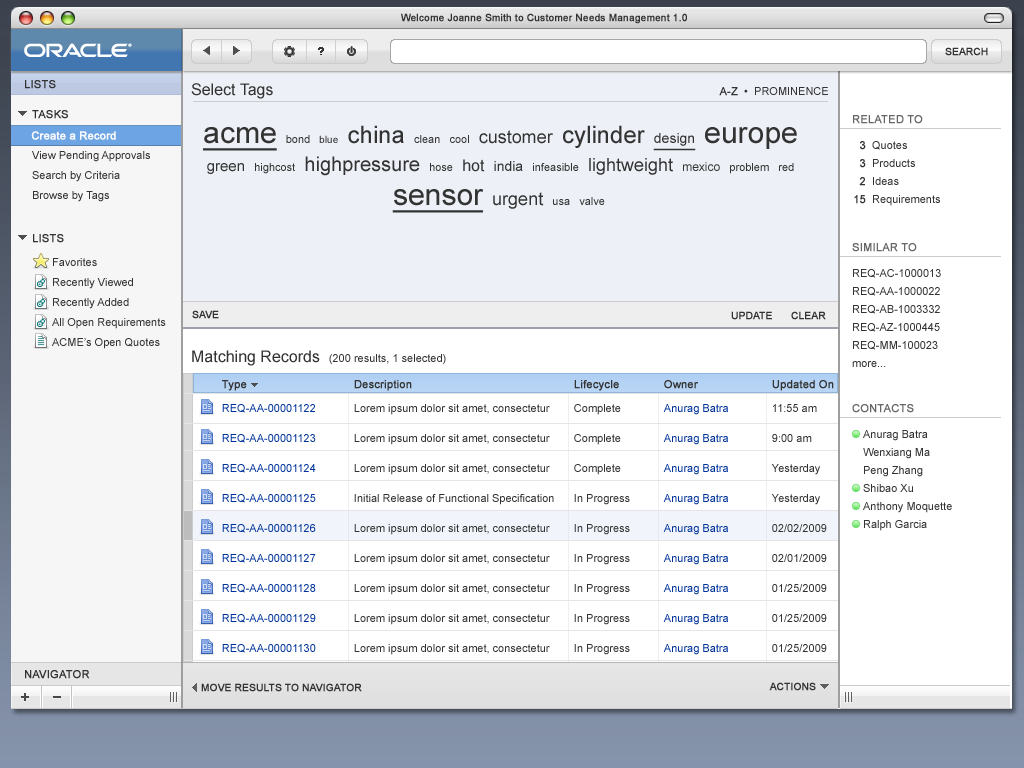
<style>
.page{position:relative;width:1024px;height:768px;background:#ffffff}
.page>*{position:absolute;margin:0}
.t1{font:16px "ArialMT";color:#333333}
.t2{font:11px "ArialMT";color:#333333;text-transform:uppercase}
.t3{font:11px "ArialMT";color:#333333;font-variant:small-caps;font-weight:bold}
.t4{font:11px "ArialMT";color:#333333;font-variant:small-caps}
.t5{font:11px "ArialMT";color:#333333;text-transform:uppercase;font-weight:bold}
.t6{font:11px/14px "ArialMT";color:#333333}
.t7{font:30px/14px "ArialMT";color:#333333;text-decoration:underline}
.t8{font:10px/14px "ArialMT";color:#333333}
.t9{font:24px/14px "ArialMT";color:#333333}
.t10{font:18px/14px "ArialMT";color:#333333}
.t11{font:14px/14px "ArialMT";color:#333333;text-decoration:underline}
.t12{font:30px/14px "ArialMT";color:#333333}
.t13{font:15px/14px "ArialMT";color:#333333}
.t14{font:20px/14px "ArialMT";color:#333333}
.t15{font:16px/14px "ArialMT";color:#333333}
.t16{font:14px/14px "ArialMT";color:#333333}
.t17{font:12px/14px "ArialMT";color:#333333}
.t18{font:11px "ArialMT";color:#666666;text-transform:uppercase;font-weight:bold}
.t19{font:11px "ArialMT";color:#666666;font-weight:bold}
.t20{font:11px "ArialMT";color:#fafafd;font-weight:bold}
.t21{font:11px/20px "ArialMT";color:#333333}
.t22{font:11px/18px "ArialMT";color:#333333;font-weight:bold}
.t23{font:11px/18px "ArialMT";color:#333333}
.t24{font:10px "ArialMT";color:#333333;text-transform:uppercase;font-weight:bold}
.t25{font:10px "ArialMT";color:#333333;font-weight:bold}
.t26{font:11px "ArialMT";color:#333333}
.t27{font:11px/10px "ArialMT";color:#003399}
.t28{font:11px "ArialMT";color:#333333;font-weight:bold}
.t29{font:11px/14px "ArialMT";color:#003399}
.t30{font:11px/10px "ArialMT";color:#333333}
.t31{font:11px/8px "ArialMT";color:#333333;font-weight:bold}
</style>
<div class="page">
<p class="t1" style="left:191px;top:83px;width:82px;height:16px">Select Tags</p>
<p class="t2" style="left:719px;top:87px;width:109px;height:9px"><span class="t3">A-Z</span><span class="t4">  •  P</span>rominence</p>
<p class="t5" style="left:32px;top:110px;width:36px;height:9px">Tasks</p>
<p class="t6" style="left:203px;top:125px;width:594px;height:88px;text-align:center"><span class="t7">acme</span>   bond   <span class="t8">blue   </span><span class="t9">china</span>   clean   cool   <span class="t10">customer   </span><span class="t9">cylinder   </span><span class="t11">design   </span><span class="t12">europe   <br></span><span class="t13"><br>green</span>   highcost   <span class="t14">highpressure</span>   hose   <span class="t15">hot   </span><span class="t16">india</span>   infeasible   <span class="t10">lightweight   </span><span class="t17">mexico</span>   problem   red   <br><br><span class="t7">sensor   </span><span class="t10">urgent</span>   usa   valve</p>
<p class="t18" style="left:853px;top:115px;width:70px;height:9px"><span class="t19">R</span>elated To</p>
<p class="t20" style="left:31px;top:131px;width:85px;height:9px">Create a Record</p>
<p class="t21" style="left:32px;top:131px;width:118px;height:71px">Create a Record<br>View Pending Approvals<br>Search by Criteria<br>Browse by Tags</p>
<p class="t22" style="left:854px;top:141px;width:12px;height:63px;text-align:right">3<br>3<br>2<br>15</p>
<p class="t23" style="left:872px;top:141px;width:68px;height:65px">Quotes<br>Products<br>Ideas<br>Requirements</p>
<p class="t5" style="left:33px;top:234px;width:31px;height:9px">lists</p>
<p class="t18" style="left:852px;top:243px;width:65px;height:9px"><span class="t19">S</span>IMILAR TO</p>
<p class="t21" style="left:52px;top:258px;width:114px;height:91px">Favorites<br>Recently Viewed<br>Recently Added<br>All Open Requirements<br>ACME’s Open Quotes</p>
<p class="t23" style="left:852px;top:269px;width:89px;height:98px">REQ-AC-1000013<br>REQ-AA-1000022<br>REQ-AB-1003332<br>REQ-AZ-1000445<br>REQ-MM-100023<br>more...</p>
<p class="t24" style="left:192px;top:310px;width:27px;height:9px"><span class="t25">S</span>ave</p>
<p class="t24" style="left:731px;top:311px;width:41px;height:9px">Update</p>
<p class="t24" style="left:791px;top:311px;width:35px;height:9px">Clear</p>
<p class="t26" style="left:192px;top:350px;width:254px;height:16px"><span class="t1">Matching Records  </span>(200 results, 1 selected)</p>
<p class="t27" style="left:222px;top:380px;width:94px;height:273px"><span class="t28">Type<br><br></span><span class="t29">REQ-AA-00001122<br></span><br><br>REQ-AA-00001123<br><br><br>REQ-AA-00001124<br><br><br>REQ-AA-00001125<br><br> <br>REQ-AA-00001126<br><br><br>REQ-AA-00001127<br><br><br>REQ-AA-00001128<br><br><br>REQ-AA-00001129<br><br><br>REQ-AA-00001130</p>
<p class="t30" style="left:354px;top:380px;width:200px;height:275px"><span class="t28">De</span><span class="t31">scription<br><br></span><span class="t6">Lorem ipsum dolor sit amet, consectetur <br></span><br><br>Lorem ipsum dolor sit amet, consectetur <br><br><br>Lorem ipsum dolor sit amet, consectetur <br><br><br>Initial Release of Functional Specification<br><br><br>Lorem ipsum dolor sit amet, consectetur<br><br><br>Lorem ipsum dolor sit amet, consectetur <br><br><br>Lorem ipsum dolor sit amet, consectetur <br><br><br>Lorem ipsum dolor sit amet, consectetur <br><br><br>Lorem ipsum dolor sit amet, consectetur</p>
<p class="t30" style="left:574px;top:380px;width:56px;height:275px"><span class="t28">Lifecycle<br><br></span><span class="t6">Complete<br></span><br><br>Complete<br><br><br>Complete<br><br><br>In Progress<br><br><br>In Progress<br><br><br>In Progress<br><br><br>In Progress <br><br><br>In Progress<br><br><br>In Progress</p>
<p class="t27" style="left:663px;top:380px;width:65px;height:275px"><span class="t28">Owner<br><br></span><span class="t29">Anurag Batra<br></span><br><br>Anurag Batra<br><br><br>Anurag Batra<br><br><br>Anurag Batra<br><br><br>Anurag Batra<br><br><br>Anurag Batra<br><br><br>Anurag Batra<br><br><br>Anurag Batra<br><br><br>Anurag Batra</p>
<p class="t30" style="left:771px;top:380px;width:63px;height:272px"><span class="t28">Updated On<br><br></span><span class="t6">11:55 am<br></span><br><br>9:00 am<br><br><br>Yesterday<br><br><br>Yesterday<br><br><br>02/02/2009<br><br><br>02/01/2009<br><br><br>01/25/2009<br><br><br>01/25/2009<br><br><br>01/25/2009</p>
<p class="t18" style="left:852px;top:404px;width:62px;height:9px">contacts</p>
<p class="t23" style="left:863px;top:430px;width:89px;height:101px">Anurag Batra<br>Wenxiang Ma<br>Peng Zhang<br>Shibao Xu<br>Anthony Moquette<br>Ralph Garcia</p>
<p class="t24" style="left:201px;top:683px;width:161px;height:9px">Move results to Navigator</p>
<p class="t24" style="left:769px;top:682px;width:47px;height:9px">actions</p>
</div>
